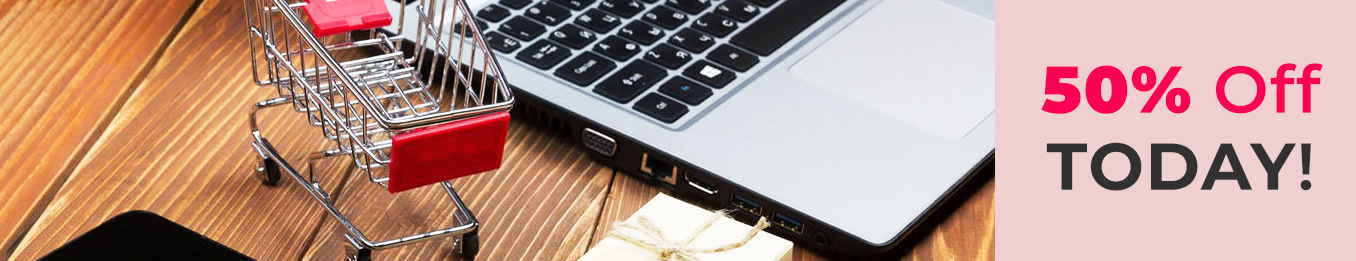
<style>
.page{position:relative;width:1356px;height:261px;background:#efcfcf}
.page>*{position:absolute;margin:0}
.t1{font:66px/77px "Montserrat-Bold";letter-spacing:0.025em;color:#313131}
.t2{font:66px/77px "Montserrat-Black";letter-spacing:0.025em;color:#ff0054}
.t3{font:66px/77px "Montserrat-SemiBold";letter-spacing:0.025em;color:#ff0054}
.t4{font:66px/77px "Montserrat-SemiBold";letter-spacing:0.025em;color:#313131}
</style>
<div class="page">
<p class="t1" style="left:1041px;top:63px;width:282px;height:128px;text-align:center"><span class="t2">50%</span><span class="t3"> Off<br></span>TODAY<span class="t4">!</span></p>
</div>
